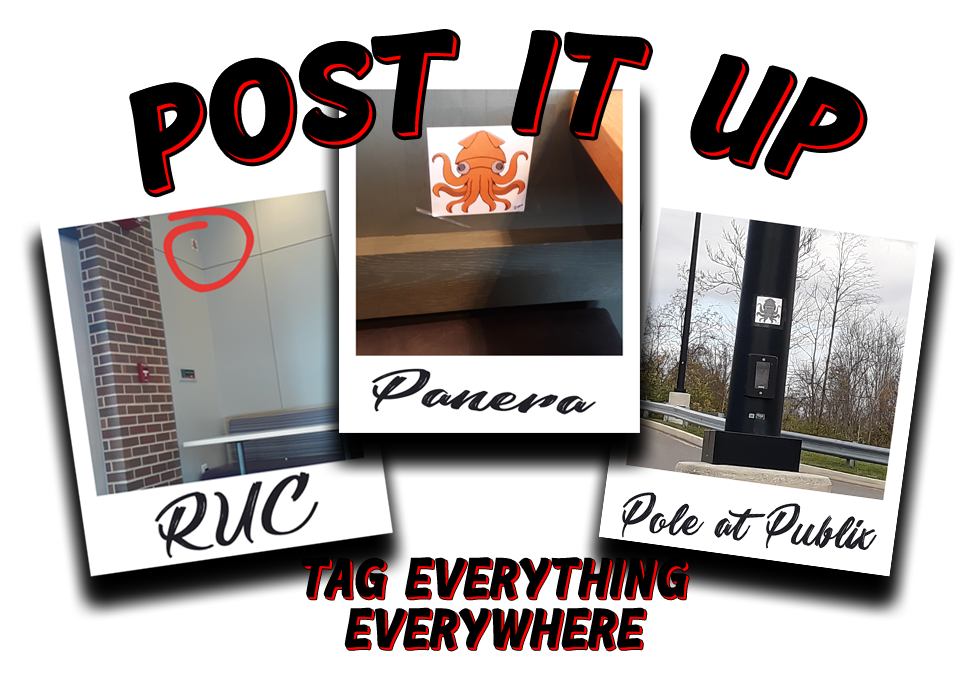
<style>
.page{position:relative;width:975px;height:675px;background:#ffffff}
.page>*{position:absolute;margin:0}
.t1{font:128.1px "Retrochips";color:#000000}
.t2{font:50.5px/50.5px "Retrochips";color:#000000}
</style>
<div class="page">
<p class="t1" style="left:130px;top:30px;width:731px;height:161px">Post It Up</p>
<p class="t1" style="left:133px;top:33px;width:731px;height:161px">Post It Up</p>
<p class="t2" style="left:302px;top:557px;width:385px;height:92px;text-align:center">Tag Everything<br>Everywhere</p>
<p class="t2" style="left:304px;top:559px;width:385px;height:92px;text-align:center">Tag Everything<br>Everywhere</p>
</div>
